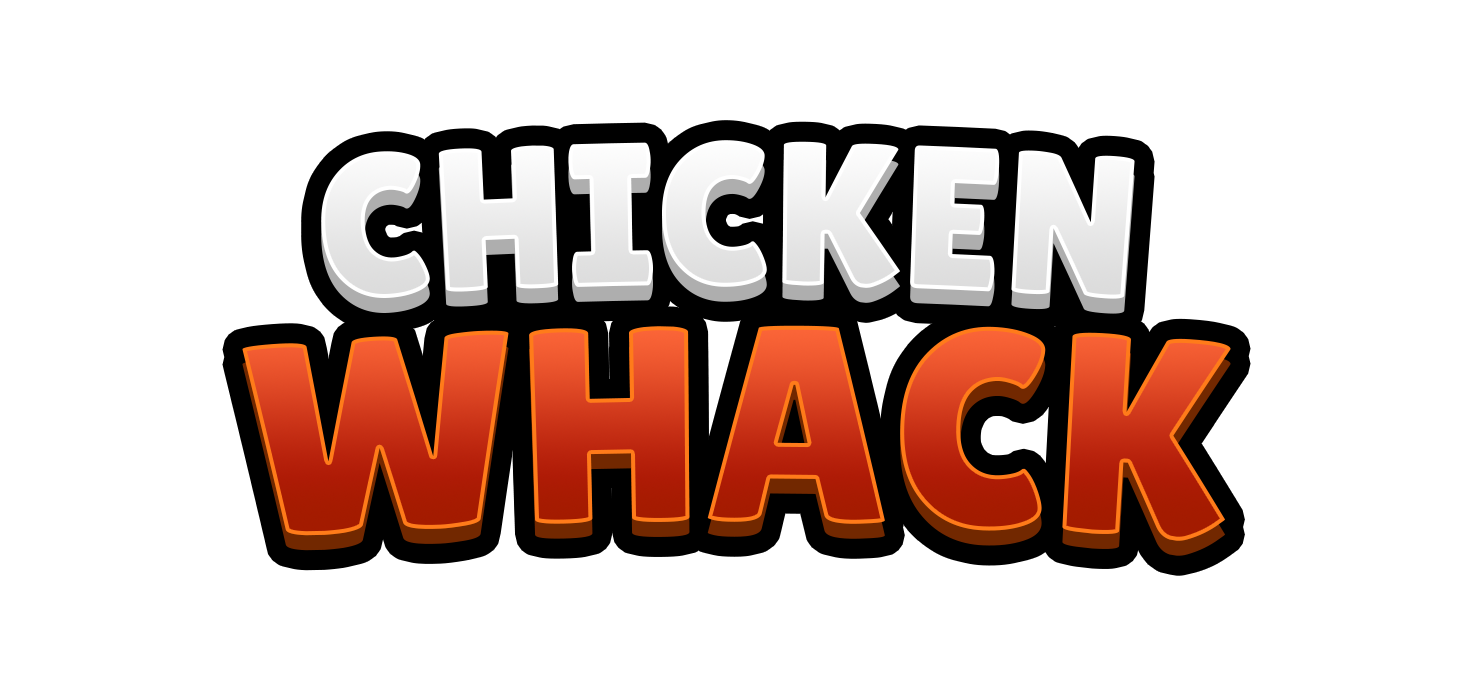
<style>
.page{position:relative;width:1460px;height:700px;background:#ffffff}
.page>*{position:absolute;margin:0}
.t1{font:203.8px "LilitaOne";color:#f0f0f0}
.t2{font:280.4px "LilitaOne"}
</style>
<div class="page">
<p class="t1" style="left:321px;top:140px;width:814px;height:159px">CHICKEN</p>
<p class="t2" style="left:242px;top:325px;width:989px;height:216px">WHACK</p>
</div>
